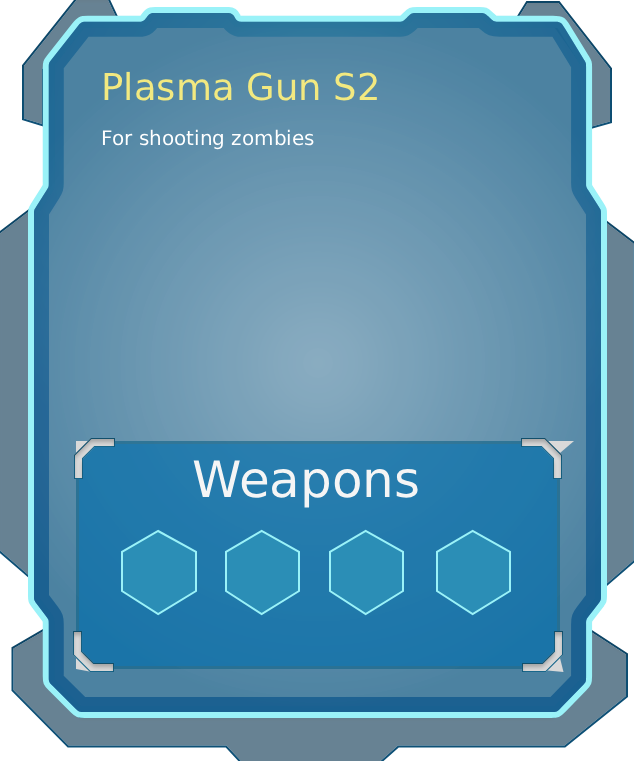
<style>
.page{position:relative;width:634px;height:761px}
.page>*{position:absolute;margin:0}
.t1{font:37px "Inria Sans";color:#f2e980}
.t2{font:20px "Inria Sans";color:#ffffff}
.t3{font:50px "Inria Sans";color:#f5f5f5}
</style>
<div class="page">
<p class="t1" style="left:104px;top:71px;width:273px;height:30px">Plasma Gun S2</p>
<p class="t2" style="left:102px;top:129px;width:212px;height:21px">For shooting zombies</p>
<p class="t3" style="left:193px;top:460px;width:225px;height:48px">Weapons</p>
</div>
